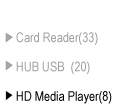
<style>
.page{position:relative;width:120px;height:108px;background:#ffffff}
.page>*{position:absolute;margin:0}
.t1{font:13.3px/29.3px "ArialNarrow";color:#a09f9f}
.t2{font:13.3px/29.3px "ArialNarrow";color:#050000}
</style>
<div class="page">
<p class="t1" style="left:16px;top:32px;width:96px;height:72px">Card Reader(33)<br>HUB USB  (20)<br><span class="t2">HD Media Player(8)</span></p>
</div>
